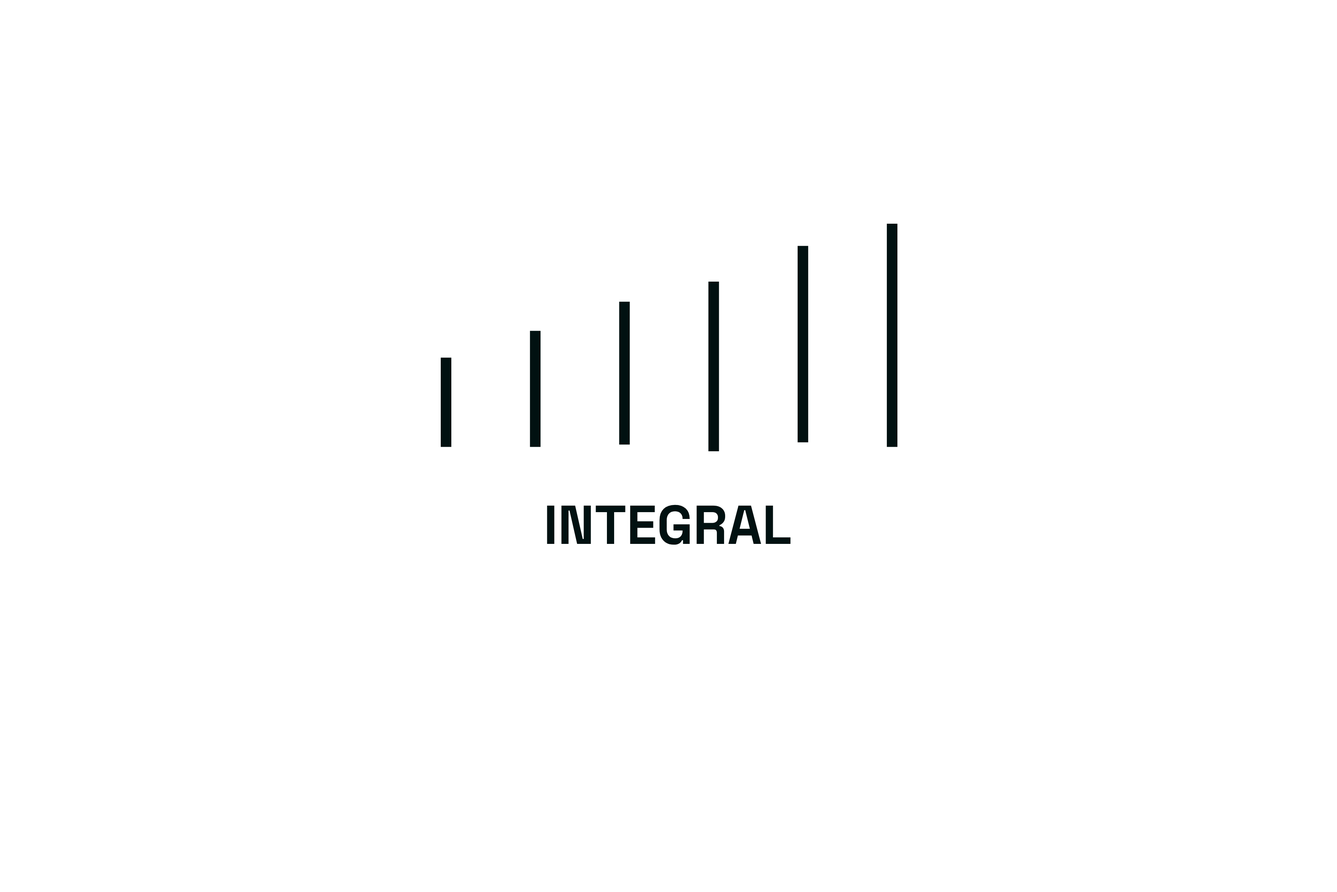
<style>
.page{position:relative;width:1337px;height:892px;background:#ffffff}
.page>*{position:absolute;margin:0}
.t1{font:54.7px "SpaceGroteskLight-Bold";color:#011111}
</style>
<div class="page">
<p class="t1" style="left:547px;top:504px;width:244px;height:40px">INTEGRAL</p>
</div>
